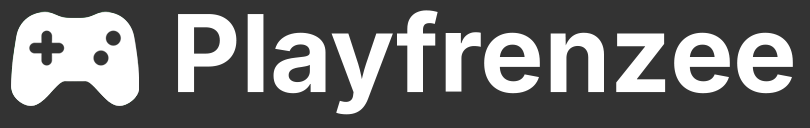
<style>
.page{position:relative;width:810px;height:128px;background:#333333}
.page>*{position:absolute;margin:0}
.t1{font:96px "Inter-Bold";color:#ffffff}
</style>
<div class="page">
<p class="t1" style="left:178px;top:10px;width:615px;height:105px">Playfrenzee</p>
</div>
